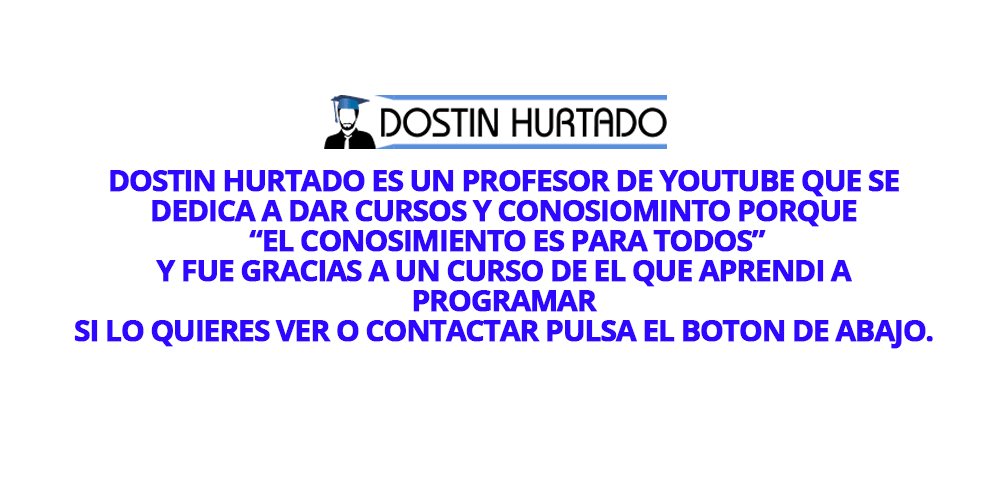
<style>
.page{position:relative;width:1000px;height:500px;background:#ffffff}
.page>*{position:absolute;margin:0}
.t1{font:30px/30px "OpenSans-Bold";letter-spacing:-0.062em;color:#2f06ff;font-weight:bold}
</style>
<div class="page">
<p class="t1" style="left:74px;top:170px;width:859px;height:179px;text-align:center">DOSTIN HURTADO ES UN PROFESOR DE YOUTUBE QUE SE DEDICA A DAR CURSOS Y CONOSIOMINTO PORQUE<br> “EL CONOSIMIENTO ES PARA TODOS”<br>Y FUE GRACIAS A UN CURSO DE EL QUE APRENDI A <br>PROGRAMAR<br>SI LO QUIERES VER O CONTACTAR PULSA EL BOTON DE ABAJO.</p>
</div>
